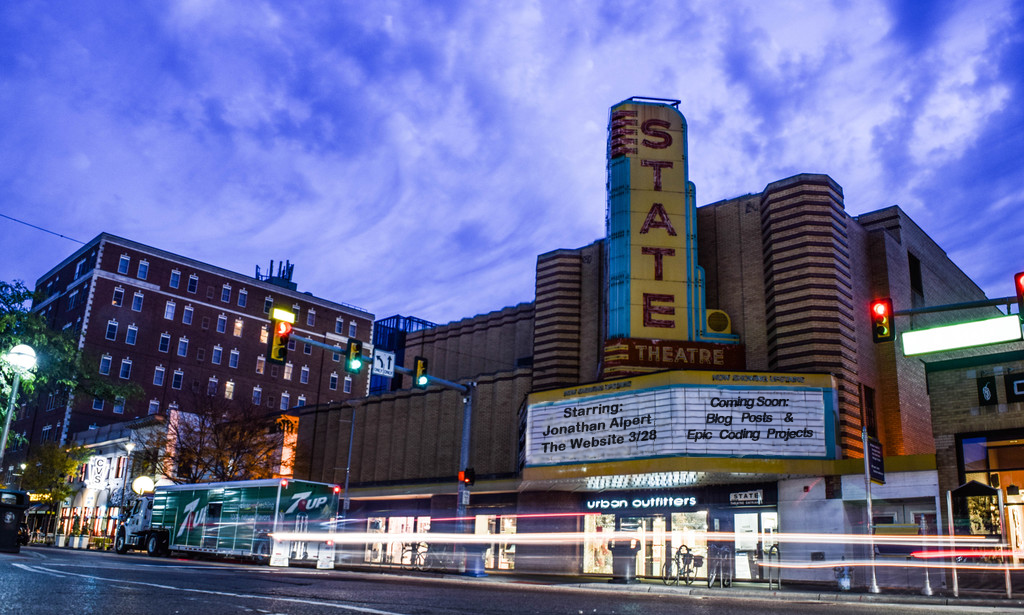
<style>
.page{position:relative;width:1024px;height:615px}
.page>*{position:absolute;margin:0}
.t1{font:13.3px "ArialRoundedMTBold";letter-spacing:-0.1em;color:#151923;font-weight:bold;font-style:italic}
.t2{font:13.3px "ArialRoundedMTBold";color:#181a22;font-weight:bold;font-style:italic}
</style>
<div class="page">
<p class="t1" style="left:687px;top:396px;width:127px;height:47px;text-align:center;rotate:-1deg">Coming Soon:<br>Blog    Posts     &amp;<br>Epic   Coding   Projects</p>
<p class="t2" style="left:541px;top:403px;width:116px;height:50px;rotate:-7deg">Starring: <br>Jonathan Alpert<br>The Website 3/28</p>
</div>
